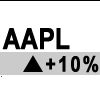
<style>
.page{position:relative;width:100px;height:100px;background:#ffffff}
.page>*{position:absolute;margin:0}
.t1{font:28.8px "Arial-BoldMT";letter-spacing:-0.01em;color:#000000;font-weight:bold;scale:0.83 1}
.t2{font:21.6px "Arial-BoldMT";letter-spacing:0.1em;color:#000000;font-weight:bold;scale:0.83 1}
</style>
<div class="page">
<p class="t1" style="left:2px;top:27px;width:68px;height:22px">AAPL</p>
<p class="t2" style="left:46px;top:54px;width:53px;height:18px">+10%</p>
</div>
